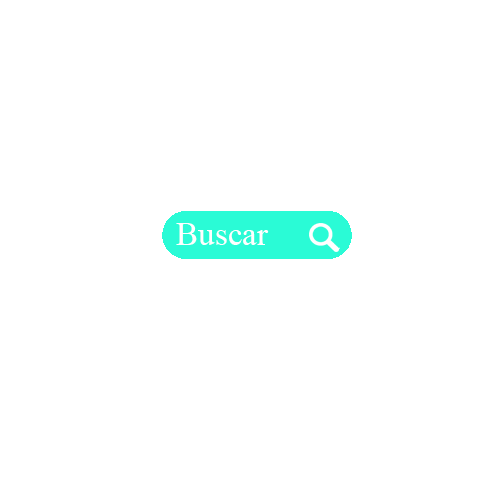
<style>
.page{position:relative;width:500px;height:500px;background:#ffffff}
.page>*{position:absolute;margin:0}
.t1{font:33.3px "TimesNewRomanPSMT";color:#ffffff}
</style>
<div class="page">
<p class="t1" style="left:176px;top:223px;width:93px;height:22px">Buscar</p>
</div>
